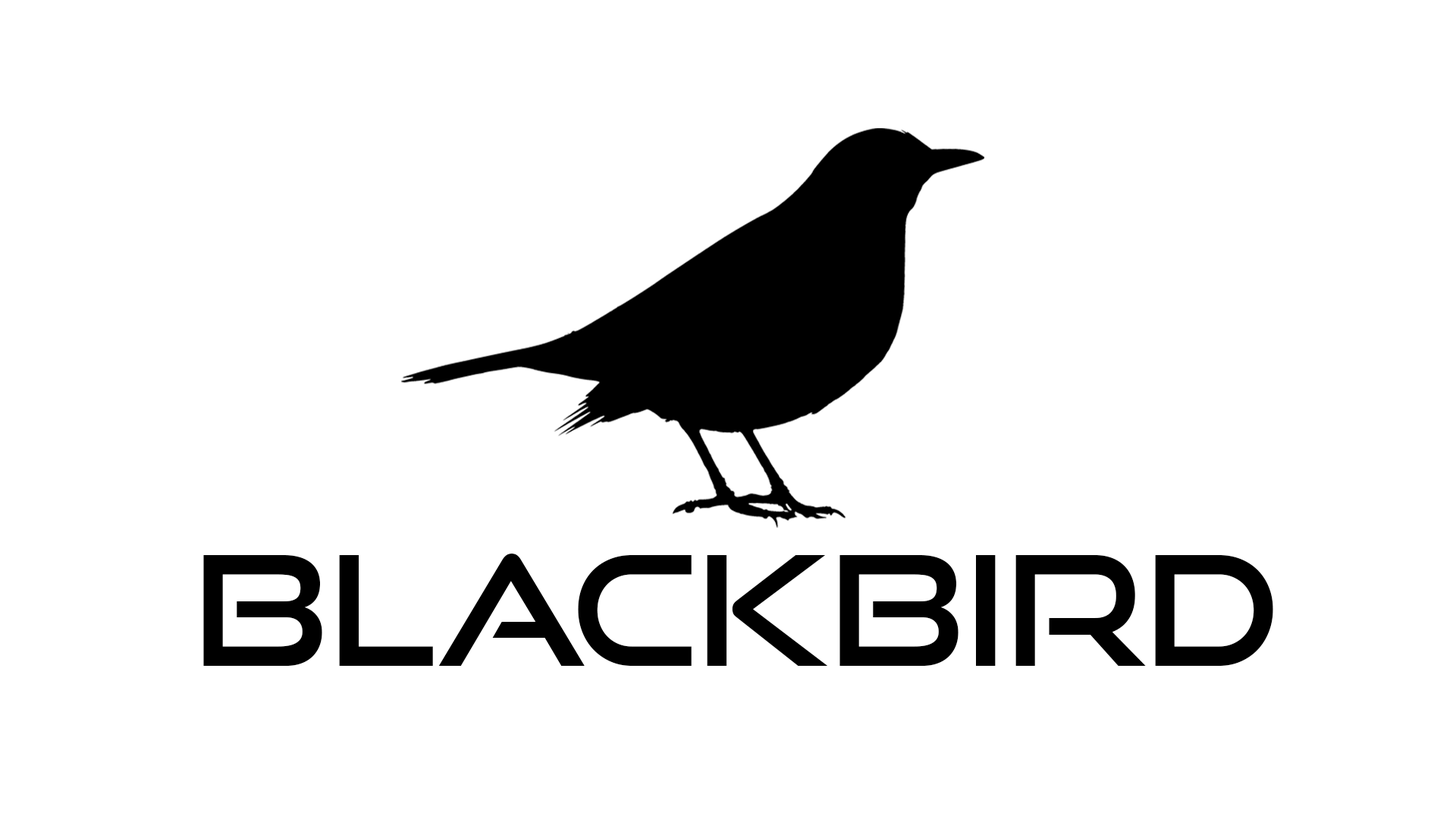
<style>
.page{position:relative;width:1456px;height:819px;background:#ffffff}
.page>*{position:absolute;margin:0}
.t1{font:151.7px "GoodTimesRg-Regular";color:#000000}
</style>
<div class="page">
<p class="t1" style="left:203px;top:554px;width:1070px;height:112px">BLACKBIRD</p>
</div>
